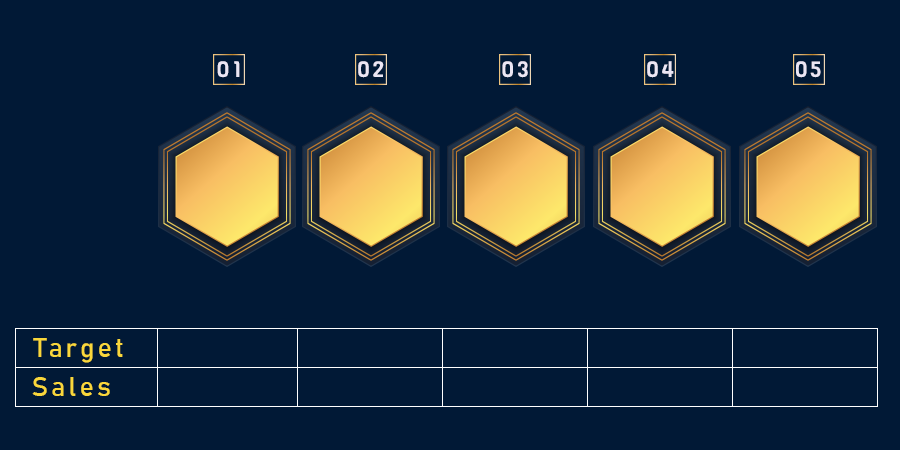
<style>
.page{position:relative;width:900px;height:450px;background:#011936}
.page>*{position:absolute;margin:0}
.t1{font:22px "Viga-Regular";letter-spacing:0.12em;color:#ebe6f4}
.t2{font:26.7px "Bahnschrift";letter-spacing:0.12em;color:#f9d73b}
</style>
<div class="page">
<p class="t1" style="left:217px;top:61px;width:23px;height:17px">01</p>
<p class="t1" style="left:358px;top:61px;width:26px;height:17px">02</p>
<p class="t1" style="left:502px;top:61px;width:26px;height:17px">03</p>
<p class="t1" style="left:647px;top:61px;width:27px;height:17px">04</p>
<p class="t1" style="left:796px;top:61px;width:25px;height:17px">05</p>
<p class="t2" style="left:33px;top:338px;width:90px;height:25px">Target</p>
<p class="t2" style="left:32px;top:377px;width:78px;height:19px">Sales</p>
</div>
